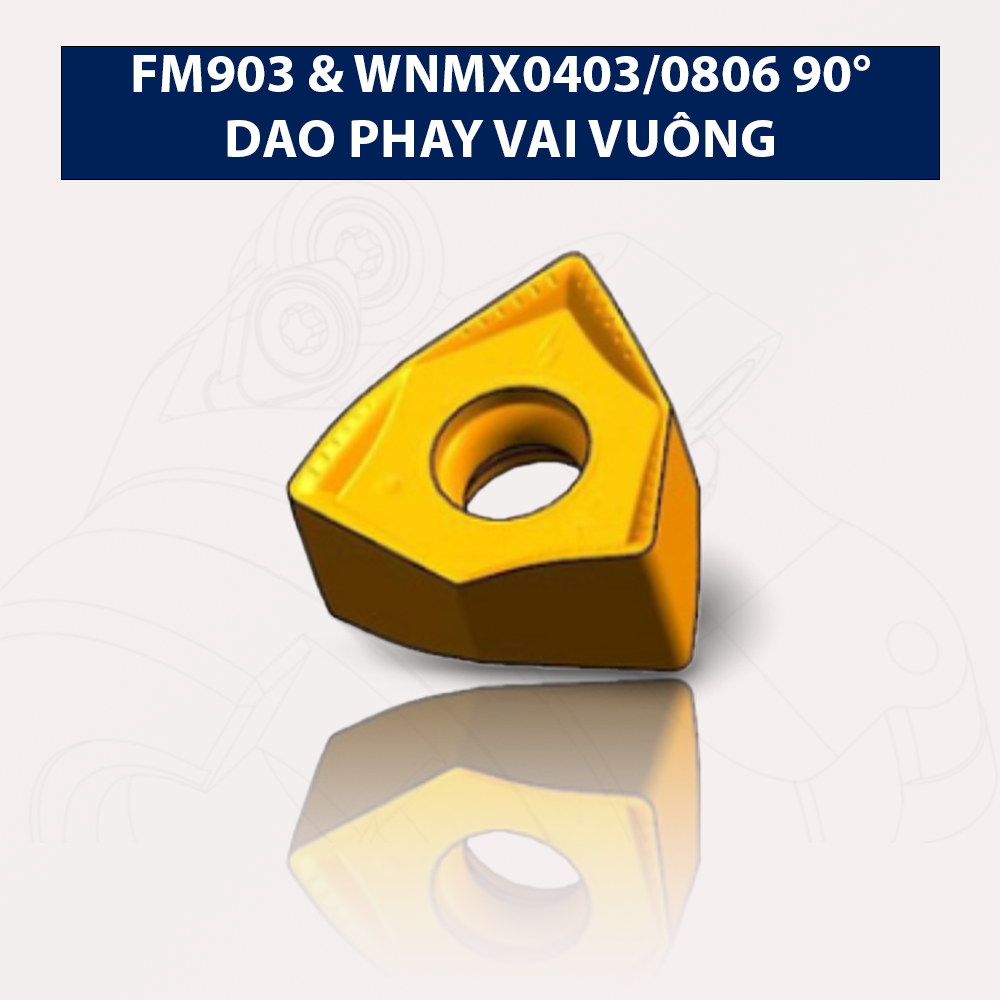
<style>
.page{position:relative;width:1000px;height:1000px;background:#f5efef}
.page>*{position:absolute;margin:0}
.t1{font:54.3px "MyriadPro-Bold";color:#ffffff;text-transform:uppercase}
</style>
<div class="page">
<p class="t1" style="left:133px;top:55px;width:737px;height:102px;text-align:center">FM903 &amp; WNMX0403/0806 90°<br>Dao phay vai vuông</p>
</div>
